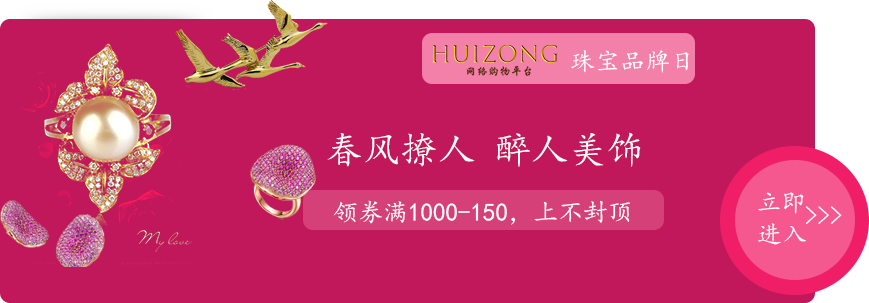
<style>
.page{position:relative;width:869px;height:303px;background:#c1185b}
.page>*{position:absolute;margin:0}
.t1{font:25px "KaiTi";color:#ffffff}
.t2{font:37.5px "KaiTi";color:#ffffff}
</style>
<div class="page">
<p class="t1" style="left:571px;top:50px;width:118px;height:23px">珠宝品牌日</p>
<p class="t2" style="left:327px;top:132px;width:314px;height:35px">春风撩人 醉人美饰</p>
<p class="t1" style="left:758px;top:192px;width:46px;height:22px">立即</p>
<p class="t1" style="left:333px;top:200px;width:297px;height:25px">领券满1000-150，上不封顶</p>
<p class="t1" style="left:805px;top:206px;width:37px;height:18px">&gt;&gt;&gt;</p>
<p class="t1" style="left:758px;top:223px;width:48px;height:22px">进入</p>
</div>
